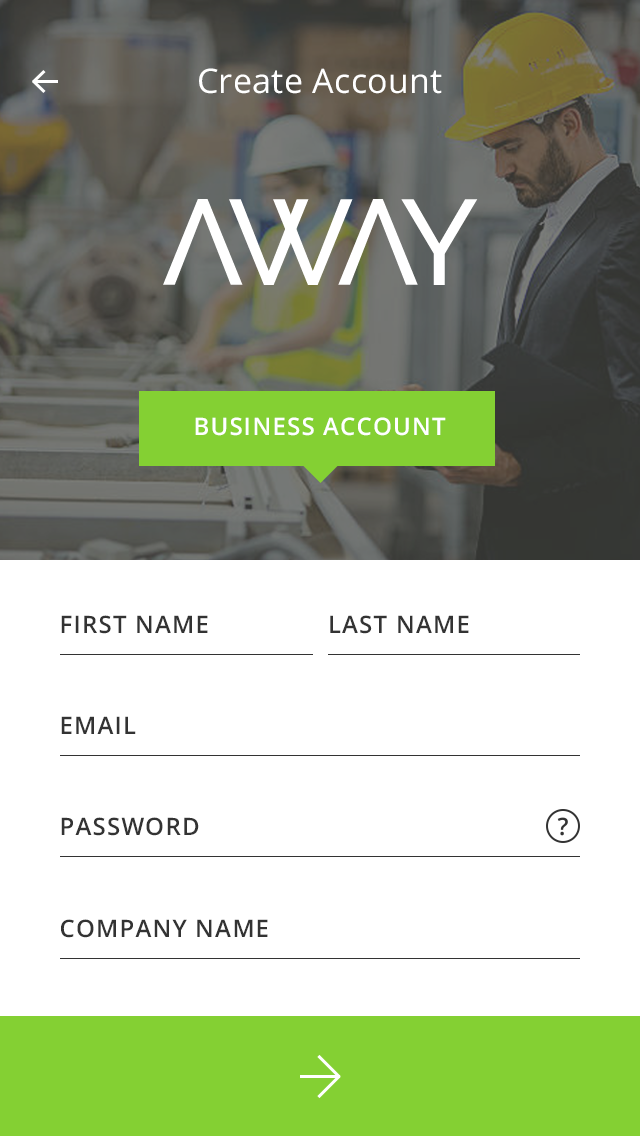
<style>
.page{position:relative;width:640px;height:1136px;background:#ffffff}
.page>*{position:absolute;margin:0}
.t1{font:34px "OpenSans";letter-spacing:0.01em;color:#ffffff}
.t2{font:24px "OpenSans-Semibold";letter-spacing:0.05em;color:#ffffff;text-transform:uppercase}
.t3{font:24px "OpenSans-Semibold";letter-spacing:0.05em;color:#333333;text-transform:uppercase}
</style>
<div class="page">
<p class="t1" style="left:199px;top:68px;width:243px;height:26px">Create Account</p>
<p class="t2" style="left:195px;top:417px;width:251px;height:19px">BUSINESS ACCOUNT</p>
<p class="t3" style="left:61px;top:615px;width:147px;height:19px">First NAME</p>
<p class="t3" style="left:330px;top:615px;width:139px;height:19px">LAST NAME</p>
<p class="t3" style="left:61px;top:716px;width:75px;height:18px">email</p>
<p class="t3" style="left:61px;top:817px;width:138px;height:19px">password</p>
<p class="t3" style="left:61px;top:919px;width:207px;height:19px">COMPANY NAME</p>
</div>
